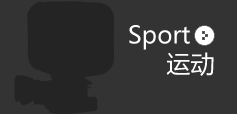
<style>
.page{position:relative;width:237px;height:114px;background:#333333}
.page>*{position:absolute;margin:0}
.t1{font:24px "MicrosoftYaHei";color:#ffffff}
</style>
<div class="page">
<p class="t1" style="left:129px;top:25px;width:61px;height:25px">Sport</p>
<p class="t1" style="left:166px;top:52px;width:48px;height:24px">运动</p>
</div>
